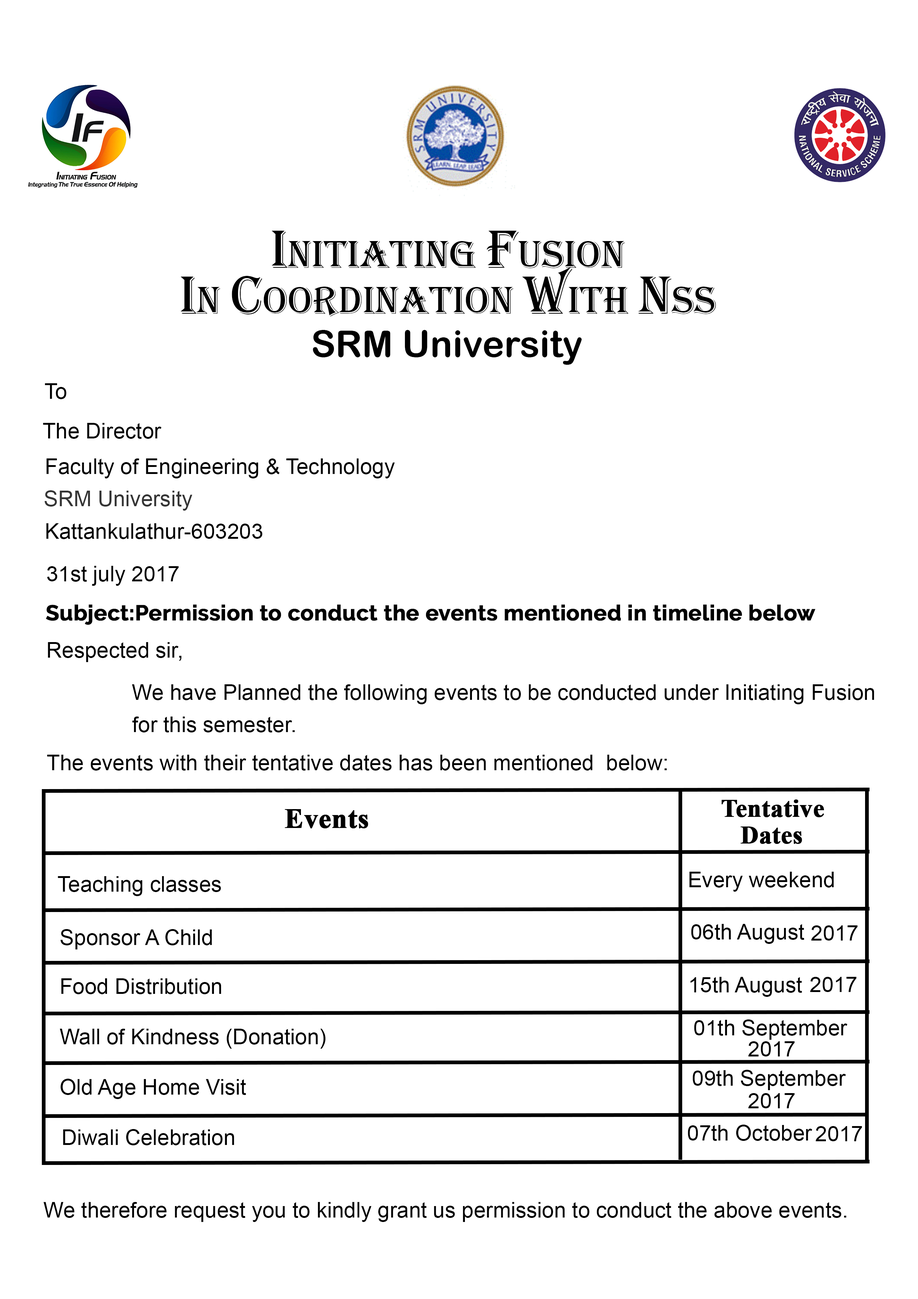
<style>
.page{position:relative;width:918px;height:1299px;background:#ffffff}
.page>*{position:absolute;margin:0}
.t1{font:40.1px "Algerian";color:#000000}
.t2{font:55.5px "Algerian";color:#000000}
.t3{font:37px "ArialRoundedMTBold";color:#000000}
.t4{font:21.6px "ArialMT";color:#000000}
.t5{font:21.6px "ArialMT";color:#343434}
.t6{font:21.6px "Raleway-Bold";color:#000000;font-weight:bold}
.t7{font:27.8px "TimesNewRomanPS-BoldMT";color:#000000;font-weight:bold}
.t8{font:24.7px "TimesNewRomanPS-BoldMT";color:#000000;font-weight:bold}
</style>
<div class="page">
<p class="t1" style="left:272px;top:231px;width:353px;height:37px"><span class="t2">I</span>NITIATING <span class="t2">F</span>USiON</p>
<p class="t1" style="left:181px;top:267px;width:535px;height:50px"><span class="t2">I</span>N <span class="t2">C</span>OORDINATION <span class="t2">W</span>ITH <span class="t2">N</span>SS</p>
<p class="t3" style="left:313px;top:330px;width:269px;height:35px">SRM University</p>
<p class="t4" style="left:45px;top:383px;width:22px;height:16px">To</p>
<p class="t4" style="left:43px;top:423px;width:118px;height:16px">The Director</p>
<p class="t4" style="left:46px;top:458px;width:349px;height:20px">Faculty of Engineering &amp; Technology</p>
<p class="t5" style="left:44px;top:490px;width:149px;height:21px">SRM University</p>
<p class="t4" style="left:46px;top:523px;width:216px;height:16px">Kattankulathur-603203</p>
<p class="t4" style="left:47px;top:566px;width:132px;height:20px">31st july 2017</p>
<p class="t6" style="left:46px;top:604px;width:770px;height:21px">Subject:Permission to conduct the events mentioned in timeline below</p>
<p class="t4" style="left:48px;top:642px;width:133px;height:20px">Respected sir,</p>
<p class="t4" style="left:132px;top:684px;width:742px;height:20px">We have Planned the following events to be conducted under Initiating Fusion</p>
<p class="t4" style="left:132px;top:716px;width:163px;height:16px">for this semester.</p>
<p class="t4" style="left:47px;top:755px;width:620px;height:15px">The events with their tentative dates has been mentioned  below:</p>
<p class="t7" style="left:285px;top:809px;width:83px;height:19px">Events</p>
<p class="t8" style="left:722px;top:799px;width:102px;height:18px">Tentative</p>
<p class="t8" style="left:740px;top:826px;width:62px;height:18px">Dates</p>
<p class="t4" style="left:58px;top:876px;width:163px;height:20px">Teaching classes</p>
<p class="t4" style="left:689px;top:872px;width:145px;height:19px">Every weekend</p>
<p class="t4" style="left:60px;top:929px;width:152px;height:20px">Sponsor A Child</p>
<p class="t4" style="left:691px;top:924px;width:113px;height:20px">06th August</p>
<p class="t4" style="left:811px;top:925px;width:47px;height:15px">2017</p>
<p class="t4" style="left:690px;top:977px;width:112px;height:20px">15th August</p>
<p class="t4" style="left:810px;top:977px;width:47px;height:15px">2017</p>
<p class="t4" style="left:61px;top:978px;width:160px;height:16px">Food Distribution</p>
<p class="t4" style="left:694px;top:1019px;width:153px;height:21px">01th September</p>
<p class="t4" style="left:60px;top:1028px;width:266px;height:20px">Wall of Kindness (Donation)</p>
<p class="t4" style="left:748px;top:1041px;width:47px;height:15px">2017</p>
<p class="t4" style="left:693px;top:1070px;width:153px;height:20px">09th September</p>
<p class="t4" style="left:60px;top:1078px;width:186px;height:21px">Old Age Home Visit</p>
<p class="t4" style="left:748px;top:1093px;width:47px;height:15px">2017</p>
<p class="t4" style="left:63px;top:1129px;width:171px;height:16px">Diwali Celebration</p>
<p class="t4" style="left:688px;top:1124px;width:124px;height:17px">07th October</p>
<p class="t4" style="left:816px;top:1126px;width:46px;height:15px">2017</p>
<p class="t4" style="left:43px;top:1202px;width:804px;height:20px">We therefore request you to kindly grant us permission to conduct the above events.</p>
</div>
